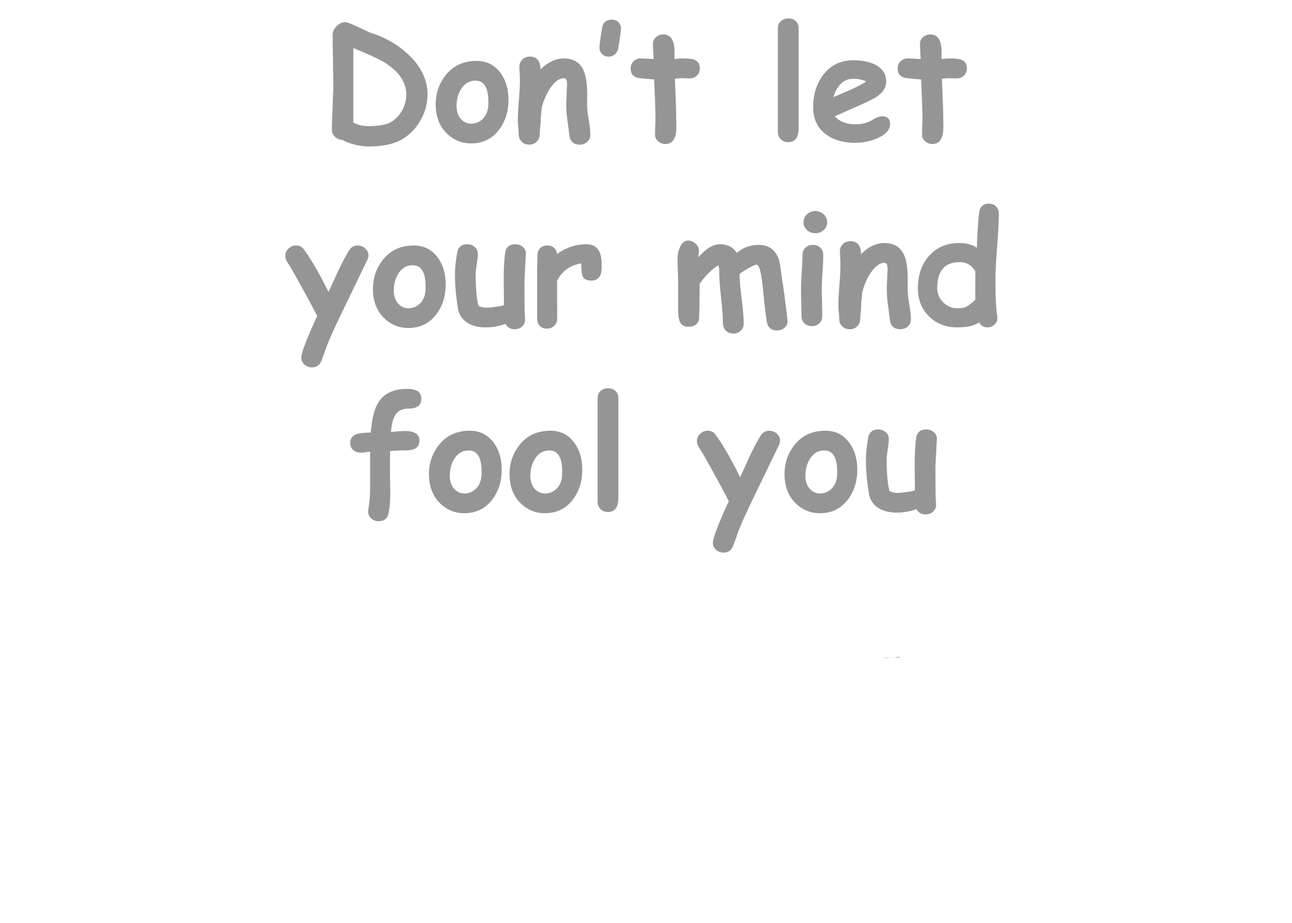
<style>
.page{position:relative;width:1292px;height:923px;background:#ffffff}
.page>*{position:absolute;margin:0}
.t1{font:153.8px "ComicSansMS-Bold";color:#959595}
</style>
<div class="page">
<p class="t1" style="left:285px;top:18px;width:714px;height:535px;text-align:center">Don’t let<br>your mind<br>fool you</p>
</div>
